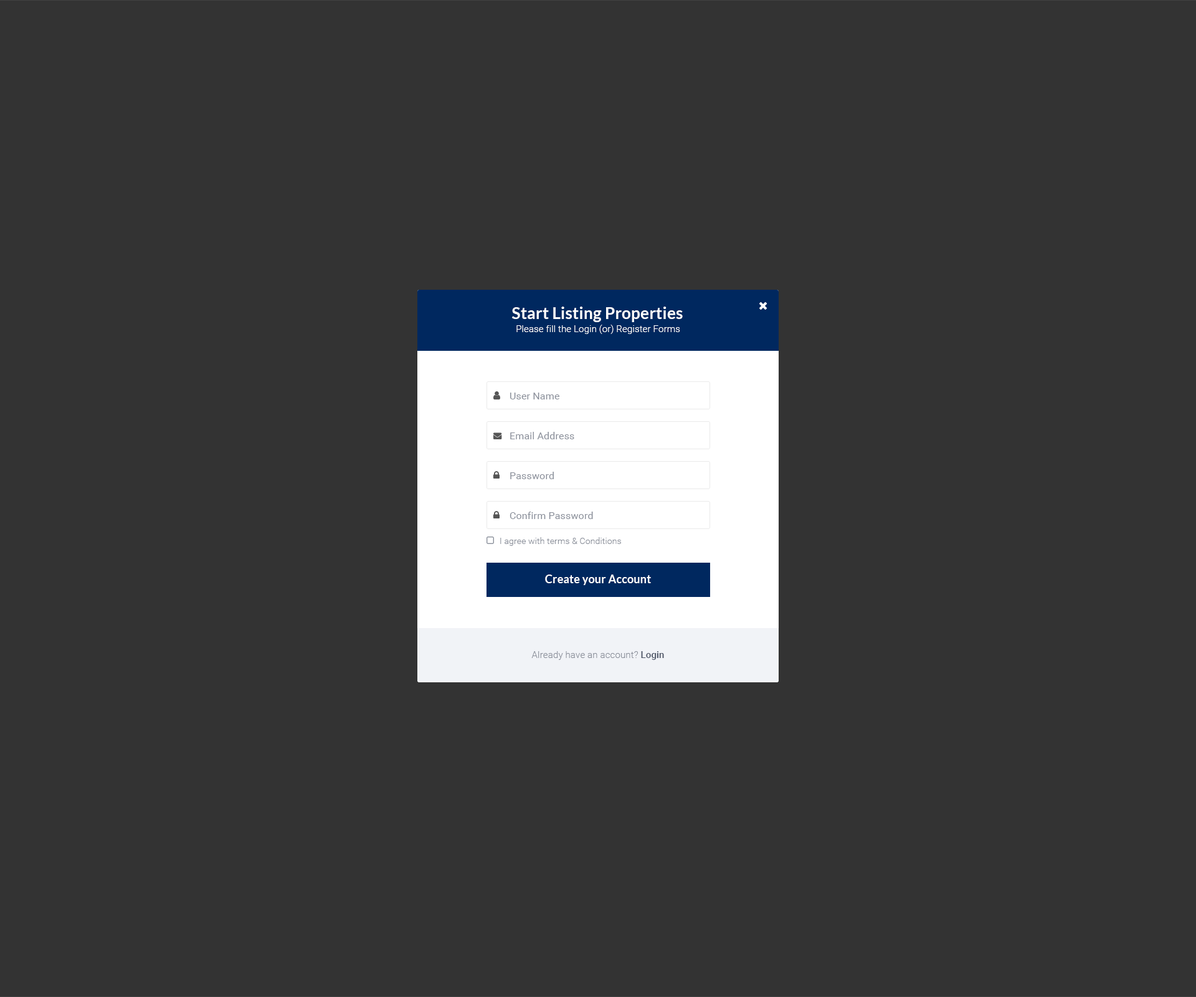
<style>
.page{position:relative;width:1196px;height:997px;background:#333333}
.page>*{position:absolute;margin:0}
.t1{font:16.2px "Lato-Bold";letter-spacing:0.01em;color:#ffffff}
.t2{font:9.3px "Roboto-Light";letter-spacing:0.01em;color:#ffffff}
.t3{font:10px "Roboto-Regular";letter-spacing:0.01em;color:#8a8f9a}
.t4{font:8.7px "Roboto-Light";letter-spacing:0.01em;color:#8a8f9a}
.t5{font:11.2px "Lato-Bold";letter-spacing:0.01em;color:#ffffff}
.t6{font:9.3px "Roboto-Light";letter-spacing:0.01em;color:#8a8f9a}
.t7{font:9.3px "Roboto-Medium";letter-spacing:0.01em;color:#4d5567}
</style>
<div class="page">
<p class="t1" style="left:512px;top:307px;width:171px;height:15px">Start Listing Properties</p>
<p class="t2" style="left:516px;top:325px;width:164px;height:9px">Please fill the Login (or) Register Forms</p>
<p class="t3" style="left:510px;top:393px;width:49px;height:6px">User Name</p>
<p class="t3" style="left:510px;top:432px;width:64px;height:7px">Email Address</p>
<p class="t3" style="left:510px;top:472px;width:44px;height:7px">Password</p>
<p class="t3" style="left:510px;top:512px;width:83px;height:7px">Confirm Password</p>
<p class="t4" style="left:500px;top:537px;width:121px;height:9px">I agree with terms &amp; Conditions</p>
<p class="t5" style="left:545px;top:574px;width:106px;height:11px">Create your Account</p>
<p class="t6" style="left:531px;top:651px;width:133px;height:9px">Already have an account? <span class="t7">Login</span></p>
</div>
